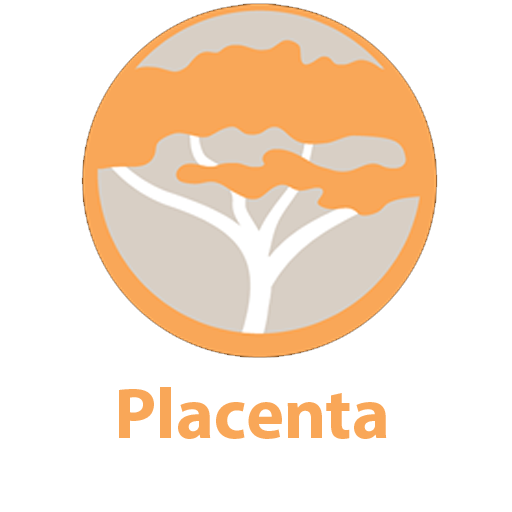
<style>
.page{position:relative;width:512px;height:512px;background:#ffffff}
.page>*{position:absolute;margin:0}
.t1{font:72px "MyriadPro-Bold";color:#f9a758}
</style>
<div class="page">
<p class="t1" style="left:119px;top:387px;width:268px;height:52px">Placenta</p>
</div>
